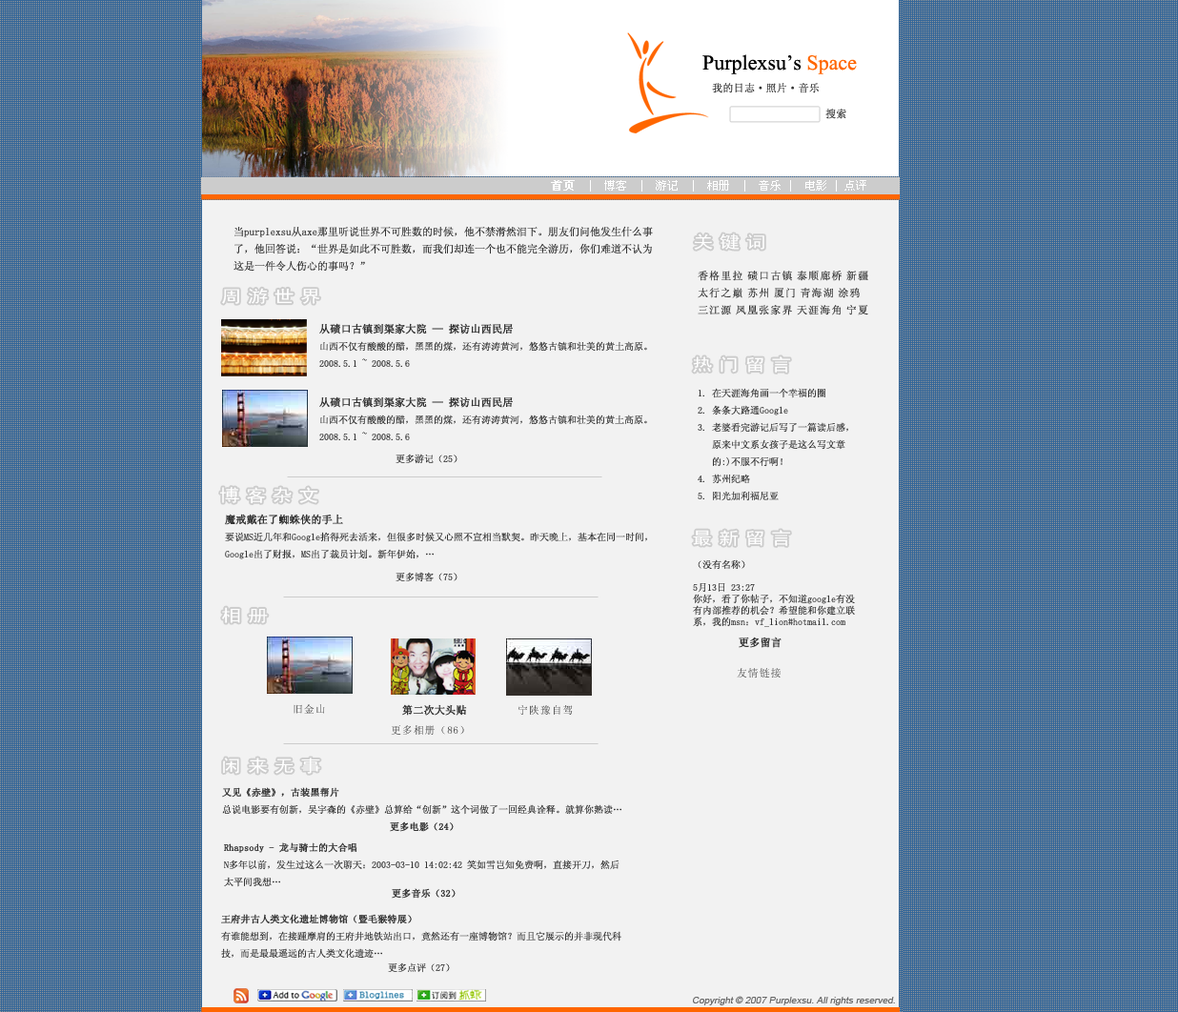
<style>
.page{position:relative;width:1178px;height:1012px;background:#f2f2f2}
.page>*{position:absolute;margin:0}
.t1{font:21px "TimesNewRomanPSMT";color:#000000}
.t2{font:21px "TimesNewRomanPSMT";color:#ff6600}
.t3{font:10.5px "SimSun";color:#333333;font-weight:bold}
.t4{font:11.4px "SimSun";color:#ffffff}
.t5{font:11.4px "SimSun";color:#ffffff;font-weight:bold}
.t6{font:10.5px/17.2px "SimSun";color:#333333}
.t7{font:17.2px "SimHei";letter-spacing:0.28em;color:#ffffff;scale:1.2 1}
.t8{font:10.5px/17.2px "SimSun";letter-spacing:0.075em;color:#333333;font-weight:bold}
.t9{font:9.5px/17.2px "SimSun";color:#333333}
.t10{font:10.5px/17.2px "SimSun";color:#333333;font-weight:bold}
.t11{font:9.5px "SimSun";color:#333333}
.t12{font:10.5px "SimSun";letter-spacing:0.075em;color:#333333}
.t13{font:10.5px "SimSun";letter-spacing:0.075em}
.t14{font:9.5px/17.2px "SimSun";color:#333333;font-weight:bold}
.t15{font:9.5px "SimSun";color:#333333;font-weight:bold}
.t16{font:9.5px "ArialMT";color:#666666;font-style:italic}
</style>
<div class="page">
<p class="t1" style="left:702px;top:54px;width:155px;height:20px">Purplexsu’s <span class="t2">Space</span></p>
<p class="t3" style="left:712px;top:83px;width:107px;height:10px">我的日志·照片·音乐</p>
<p class="t3" style="left:825px;top:109px;width:21px;height:10px">搜索</p>
<p class="t4" style="left:551px;top:180px;width:315px;height:12px"><span class="t5">首页</span>  |  博客  |  游记  |  相册  |  音乐 |  电影 | 点评</p>
<p class="t6" style="left:234px;top:226px;width:419px;height:46px">当purplexsu从axe那里听说世界不可胜数的时候，他不禁潸然泪下。朋友们问他发生什么事<br>了，他回答说：“世界是如此不可胜数，而我们却连一个也不能完全游历，你们难道不认为<br>这是一件令人伤心的事吗？”</p>
<p class="t7" style="left:694px;top:234px;width:70px;height:16px">关键词</p>
<p class="t8" style="left:698px;top:271px;width:170px;height:44px">香格里拉 碛口古镇 泰顺廊桥 新疆<br>太行之巅 苏州 厦门 青海湖 涂鸦 <br>三江源 凤凰张家界 天涯海角 宁夏</p>
<p class="t7" style="left:222px;top:288px;width:98px;height:16px">周游世界</p>
<p class="t9" style="left:319px;top:323px;width:328px;height:44px"><span class="t10">从碛口古镇到渠家大院 — 探访山西民居<br></span>山西不仅有酸酸的醋，黑黑的煤，还有涛涛黄河，悠悠古镇和壮美的黄土高原。<br>2008.5.1 ~ 2008.5.6</p>
<p class="t7" style="left:693px;top:356px;width:97px;height:17px">热门留言</p>
<p class="t9" style="left:698px;top:388px;width:150px;height:113px">1. 在天涯海角画一个幸福的圈<br>2. 条条大路通Google<br>3. 老婆看完游记后写了一篇读后感，<br>   原来中文系女孩子是这么写文章<br>   的:)不服不行啊！<br>4. 苏州纪略<br>5. 阳光加利福尼亚</p>
<p class="t9" style="left:319px;top:396px;width:328px;height:44px"><span class="t10">从碛口古镇到渠家大院 — 探访山西民居<br></span>山西不仅有酸酸的醋，黑黑的煤，还有涛涛黄河，悠悠古镇和壮美的黄土高原。<br>2008.5.1 ~ 2008.5.6</p>
<p class="t11" style="left:396px;top:454px;width:61px;height:10px">更多游记（25）</p>
<p class="t7" style="left:220px;top:487px;width:98px;height:17px">博客杂文</p>
<p class="t9" style="left:225px;top:514px;width:422px;height:45px"><span class="t10">魔戒戴在了蜘蛛侠的手上<br></span>要说MS近几年和Google掐得死去活来，但很多时候又心照不宣相当默契。昨天晚上，基本在同一时间，<br>Google出了财报，MS出了裁员计划。新年伊始，…</p>
<p class="t7" style="left:693px;top:530px;width:97px;height:16px">最新留言</p>
<p class="t11" style="left:693px;top:559px;width:162px;height:68px">（没有名称）<br> <br>5月13日 23:27<br>你好，看了你帖子，不知道google有没<br>有内部推荐的机会？希望能和你建立联<br>系，我的msn：vf_lion#hotmail.com</p>
<p class="t11" style="left:396px;top:572px;width:61px;height:10px">更多博客（75）</p>
<p class="t7" style="left:222px;top:607px;width:46px;height:16px">相册</p>
<p class="t3" style="left:739px;top:637px;width:43px;height:11px">更多留言</p>
<p class="t12" style="left:737px;top:668px;width:44px;height:11px">友情链接</p>
<p class="t13" style="left:294px;top:704px;width:31px;height:10px">旧金山</p>
<p class="t3" style="left:402px;top:704px;width:65px;height:12px">第二次大头贴</p>
<p class="t13" style="left:518px;top:705px;width:55px;height:10px">宁陕豫自驾</p>
<p class="t13" style="left:391px;top:725px;width:73px;height:10px">更多相册（86）</p>
<p class="t7" style="left:223px;top:758px;width:97px;height:16px">闲来无事</p>
<p class="t9" style="left:222px;top:787px;width:399px;height:28px"><span class="t14">又见《赤壁》，古装黑帮片<br></span>总说电影要有创新，吴宇森的《赤壁》总算给“创新”这个词做了一回经典诠释。就算你熟读…</p>
<p class="t15" style="left:390px;top:822px;width:64px;height:10px">更多电影（24）</p>
<p class="t9" style="left:224px;top:843px;width:396px;height:44px"><span class="t14">Rhapsody - 龙与骑士的大合唱<br></span>N多年以前，发生过这么一次聊天：2003-03-10 14:02:42 笑如雪岂知免费啊，直接开刀，然后<br>太平间我想…</p>
<p class="t15" style="left:392px;top:888px;width:64px;height:11px">更多音乐（32）</p>
<p class="t9" style="left:221px;top:914px;width:400px;height:44px"><span class="t14">王府井古人类文化遗址博物馆（暨毛猴特展）<br></span>有谁能想到，在接踵摩肩的王府井地铁站出口，竟然还有一座博物馆？而且它展示的并非现代科<br>技，而是最最遥远的古人类文化遗迹…</p>
<p class="t11" style="left:388px;top:963px;width:62px;height:10px">更多点评（27）</p>
<p class="t16" style="left:693px;top:996px;width:202px;height:10px">Copyright © 2007 Purplexsu. All rights reserved.</p>
</div>
